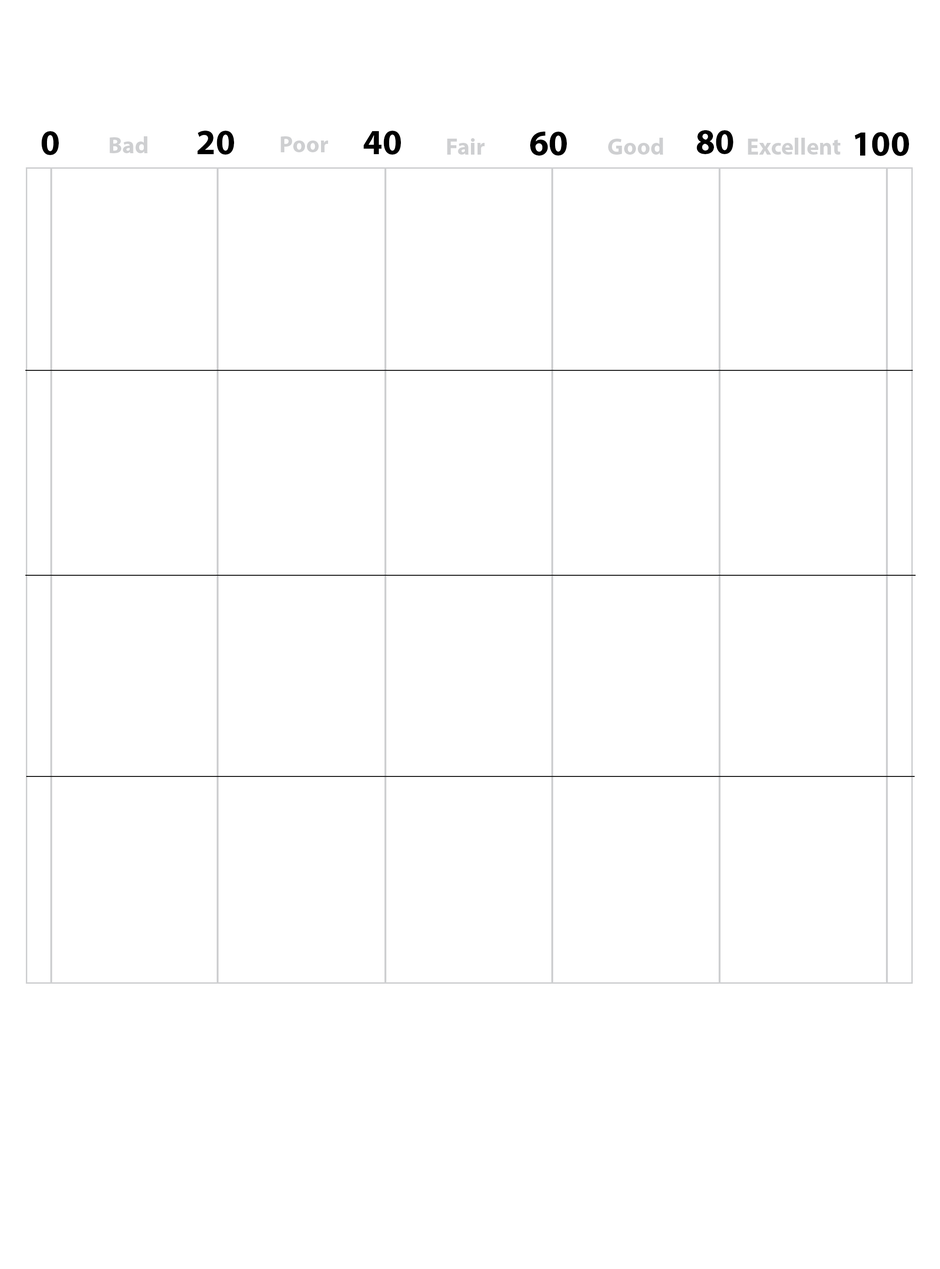
<style>
.page{position:relative;width:940px;height:1269px;background:#ffffff}
.page>*{position:absolute;margin:0}
.t1{font:35.2px "MyriadPro-Bold";color:#000000}
.t2{font:23.5px "MyriadPro-Bold";color:#cecfd1}
</style>
<div class="page">
<p class="t1" style="left:41px;top:131px;width:18px;height:24px">0</p>
<p class="t2" style="left:109px;top:136px;width:39px;height:17px">Bad</p>
<p class="t1" style="left:197px;top:131px;width:37px;height:24px">20</p>
<p class="t2" style="left:281px;top:136px;width:47px;height:16px">Poor</p>
<p class="t1" style="left:363px;top:131px;width:38px;height:24px">40</p>
<p class="t1" style="left:530px;top:132px;width:37px;height:24px">60</p>
<p class="t2" style="left:608px;top:138px;width:55px;height:17px">Good</p>
<p class="t1" style="left:696px;top:130px;width:37px;height:24px">80</p>
<p class="t2" style="left:748px;top:138px;width:92px;height:17px">Excellent</p>
<p class="t1" style="left:854px;top:132px;width:55px;height:24px">100</p>
<p class="t2" style="left:447px;top:138px;width:37px;height:17px">Fair</p>
</div>
